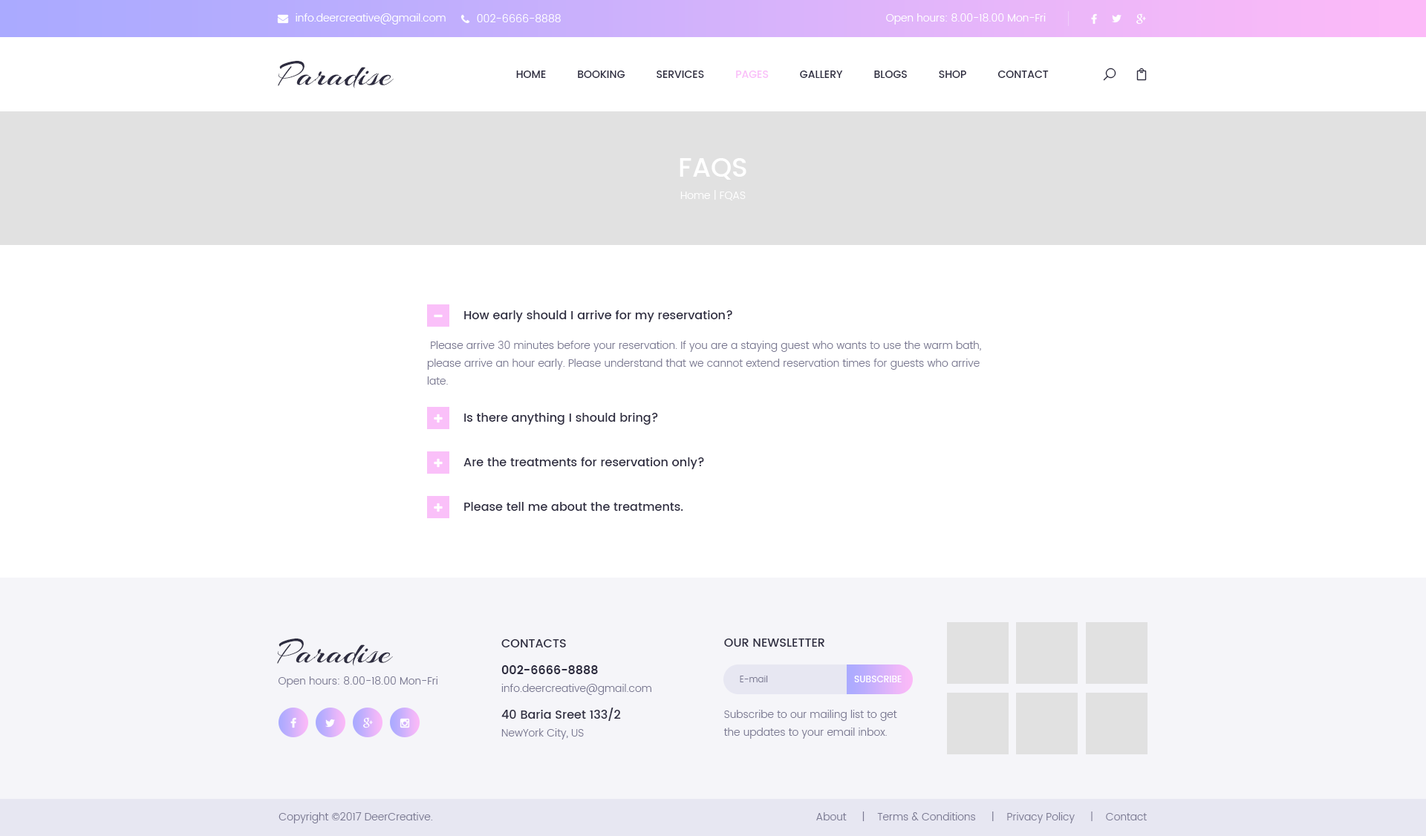
<style>
.page{position:relative;width:1426px;height:836px;background:#ffffff}
.page>*{position:absolute;margin:0}
.t1{font:10.4px "Poppins-Light";color:#ffffff}
.t2{font:35.6px "Arizonia-Regular";color:#2d2c40}
.t3{font:10.4px "Poppins-Medium";color:#2d2c40;text-transform:uppercase}
.t4{font:10.4px "Poppins-Medium";color:#fac0f9;text-transform:uppercase}
.t5{font:10.4px/22.3px "Poppins-Light";color:#ffffff}
.t6{font:26.7px/22.3px "Poppins-Medium";color:#ffffff}
.t7{font:11.9px "Poppins-Medium";color:#2d2c40}
.t8{font:10.4px/17.8px "Poppins-Light";color:#7a7992}
.t9{font:11.9px/26.7px "Poppins-Medium";color:#2d2c40;text-transform:uppercase}
.t10{font:11.9px/26.7px "Poppins-SemiBold";color:#2d2c40}
.t11{font:11.9px/26.7px "Poppins-Medium";color:#2d2c40}
.t12{font:11.9px "Poppins-Medium";color:#2d2c40;text-transform:uppercase}
.t13{font:10.4px "Poppins-Light";color:#7a7992}
.t14{font:8.9px "Poppins-Light";color:#7a7992}
.t15{font:8.9px "Poppins-Medium";color:#ffffff;text-transform:uppercase}
</style>
<div class="page">
<p class="t1" style="left:296px;top:13px;width:150px;height:12px">info.deercreative@gmail.com</p>
<p class="t1" style="left:477px;top:14px;width:84px;height:8px">002-6666-8888</p>
<p class="t1" style="left:886px;top:13px;width:160px;height:12px">Open hours: 8.00-18.00 Mon-Fri</p>
<p class="t2" style="left:278px;top:61px;width:116px;height:27px">Paradise</p>
<p class="t3" style="left:516px;top:71px;width:533px;height:7px">Home          Booking          Services        <span class="t4">  Pages      </span>    Gallery          Blogs          Shop          Contact</p>
<p class="t5" style="left:680px;top:158px;width:66px;height:43px;text-align:center"><span class="t6">FAQS<br></span>Home | FQAS</p>
<p class="t7" style="left:464px;top:310px;width:268px;height:12px">How early should I arrive for my reservation?</p>
<p class="t8" style="left:427px;top:341px;width:554px;height:44px">Please arrive 30 minutes before your reservation. If you are a staying guest who wants to use the warm bath, please arrive an hour early. Please understand that we cannot extend reservation times for guests who arrive late.</p>
<p class="t7" style="left:464px;top:413px;width:194px;height:12px">Is there anything I should bring?</p>
<p class="t7" style="left:463px;top:457px;width:241px;height:12px">Are the treatments for reservation only?</p>
<p class="t7" style="left:464px;top:502px;width:219px;height:9px">Please tell me about the treatments.</p>
<p class="t2" style="left:277px;top:639px;width:116px;height:27px">Paradise</p>
<p class="t8" style="left:501px;top:639px;width:150px;height:101px"><span class="t9">Contacts<br></span><span class="t10">002-6666-8888<br></span>info.deercreative@gmail.com<br><span class="t11">40 Baria Sreet 133/2<br></span>NewYork City, US</p>
<p class="t12" style="left:724px;top:639px;width:100px;height:8px">Our Newsletter</p>
<p class="t13" style="left:278px;top:677px;width:160px;height:11px">Open hours: 8.00-18.00 Mon-Fri</p>
<p class="t14" style="left:740px;top:676px;width:28px;height:7px">E-mail</p>
<p class="t15" style="left:854px;top:676px;width:48px;height:7px">Subscribe</p>
<p class="t8" style="left:723px;top:710px;width:174px;height:29px">Subscribe to our mailing list to get the updates to your email inbox.</p>
<p class="t13" style="left:279px;top:812px;width:154px;height:12px">Copyright ©2017 DeerCreative.</p>
<p class="t13" style="left:816px;top:812px;width:331px;height:12px">About     |    Terms &amp; Conditions     |    Privacy Policy     |    Contact</p>
</div>
